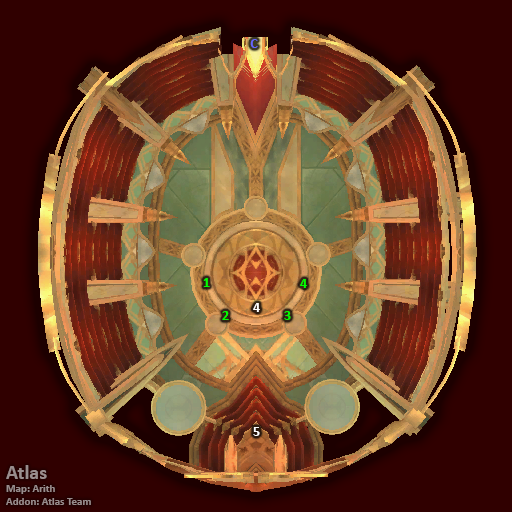
<style>
.page{position:relative;width:512px;height:512px;background:#300000}
.page>*{position:absolute;margin:0}
.t1{font:14px "Calibri-Bold";color:#6666ff}
.t2{font:14px "Calibri-Bold";color:#00ff00}
.t3{font:14px "Calibri-Bold";color:#ffffff}
.t4{font:11px "Calibri-Bold";color:#998d8d}
.t5{font:20px "Calibri-Bold";color:#998d8d}
</style>
<div class="page">
<p class="t1" style="left:250px;top:39px;width:8px;height:9px">C</p>
<p class="t2" style="left:203px;top:278px;width:7px;height:9px">1</p>
<p class="t2" style="left:300px;top:279px;width:7px;height:9px">4</p>
<p class="t3" style="left:253px;top:303px;width:7px;height:9px">4</p>
<p class="t2" style="left:222px;top:311px;width:7px;height:9px">2</p>
<p class="t2" style="left:284px;top:311px;width:7px;height:9px">3</p>
<p class="t3" style="left:253px;top:427px;width:7px;height:9px">5</p>
<p class="t4" style="left:6px;top:465px;width:85px;height:40px"><span class="t5">Atlas<br></span>Map: Arith<br>Addon: Atlas Team</p>
</div>
